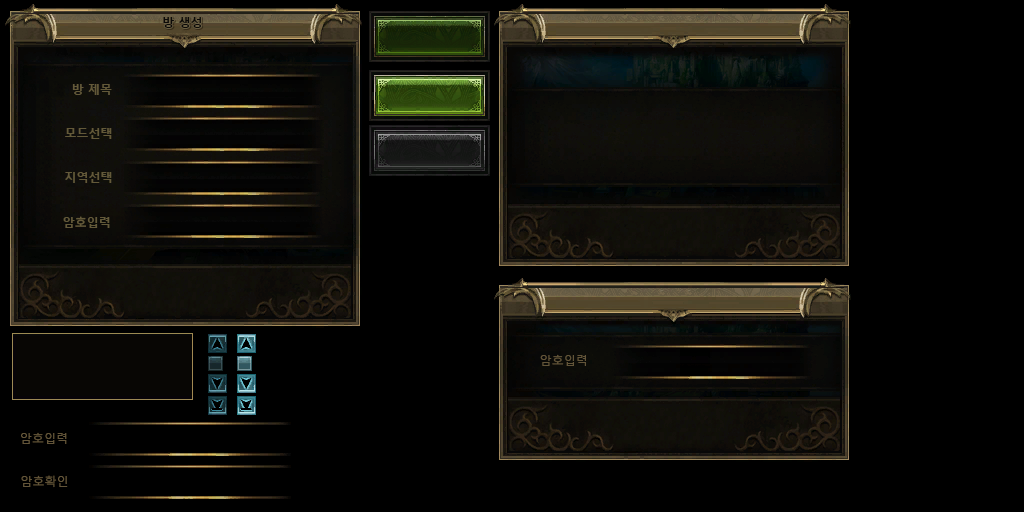
<style>
.page{position:relative;width:1024px;height:512px;background:#000000}
.page>*{position:absolute;margin:0}
.t1{font:12px "MalgunGothicBold";color:#0c0a08}
.t2{font:12px "MalgunGothicBold";color:#635939}
.t3{font:12px "MalgunGothicRegular";color:#635539}
</style>
<div class="page">
<p class="t1" style="left:163px;top:17px;width:39px;height:11px">방 생성</p>
<p class="t2" style="left:72px;top:84px;width:40px;height:11px">방 제목</p>
<p class="t2" style="left:65px;top:128px;width:47px;height:11px">모드선택</p>
<p class="t2" style="left:65px;top:172px;width:47px;height:11px">지역선택</p>
<p class="t2" style="left:63px;top:216px;width:47px;height:12px">암호입력</p>
<p class="t3" style="left:540px;top:354px;width:46px;height:12px">암호입력</p>
<p class="t3" style="left:21px;top:432px;width:46px;height:12px">암호입력</p>
<p class="t3" style="left:21px;top:475px;width:47px;height:13px">암호확인</p>
</div>
